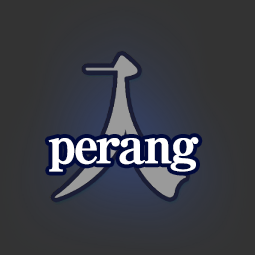
<style>
.page{position:relative;width:255px;height:255px}
.page>*{position:absolute;margin:0}
.t1{font:50px "RyuminPro-ExBold";letter-spacing:-0.08em;color:#ffffff;font-weight:bold}
</style>
<div class="page">
<p class="t1" style="left:48px;top:137px;width:151px;height:35px">perang</p>
</div>
